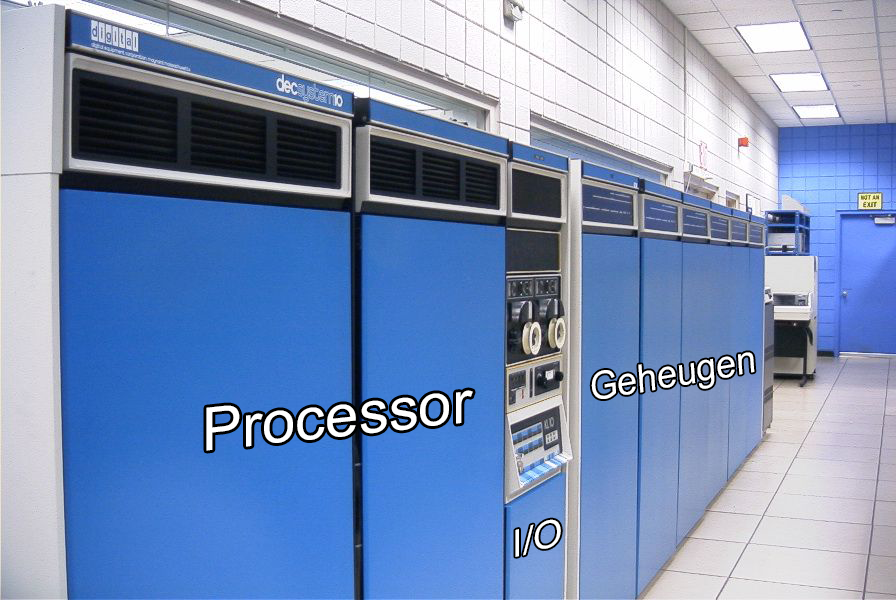
<style>
.page{position:relative;width:896px;height:600px}
.page>*{position:absolute;margin:0}
.t1{font:38.9px "ArialMT";color:#ffffff;scale:0.93 1}
.t2{font:59.8px "ArialMT";color:#ffffff}
.t3{font:37.9px "ArialMT";color:#ffffff;scale:1.04 1}
</style>
<div class="page">
<p class="t1" style="left:591px;top:352px;width:164px;height:47px;rotate:-10deg">Geheugen</p>
<p class="t2" style="left:206px;top:390px;width:267px;height:61px;rotate:-6deg">Processor</p>
<p class="t3" style="left:515px;top:519px;width:46px;height:38px;rotate:-16deg">I/O</p>
</div>
